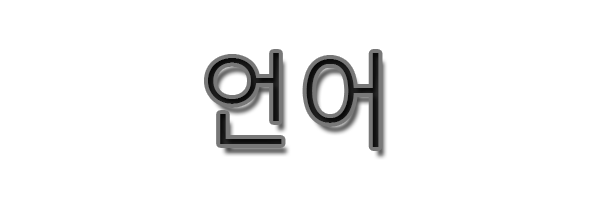
<style>
.page{position:relative;width:600px;height:200px;background:#ffffff}
.page>*{position:absolute;margin:0}
.t1{font:100px "MalgunGothic-Semilight";color:#121212}
</style>
<div class="page">
<p class="t1" style="left:208px;top:53px;width:171px;height:94px">언어</p>
</div>
